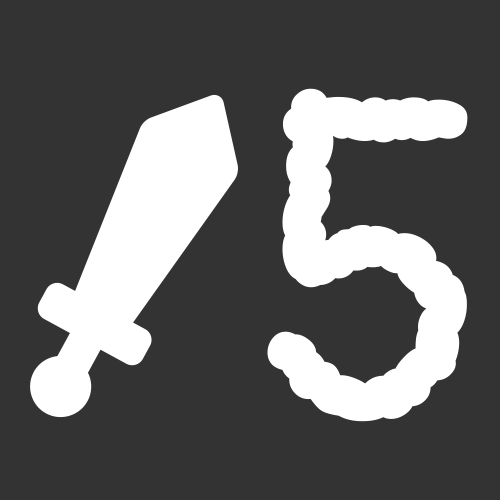
<style>
.page{position:relative;width:500px;height:500px;background:#333333}
.page>*{position:absolute;margin:0}
.t1{font:454.1px "Pangolin-Regular";color:#ffffff}
</style>
<div class="page">
<p class="t1" style="left:267px;top:88px;width:201px;height:334px">5</p>
</div>
